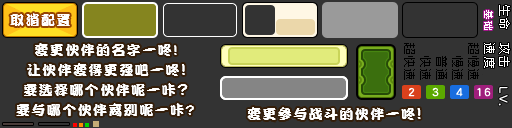
<style>
.page{position:relative;width:512px;height:128px;background:#333333}
.page>*{position:absolute;margin:0}
.t1{font:11.9px "ZpixEX2";letter-spacing:0.1em;color:#ffffff}
.t2{font:14px "DFPKanTingLiuW9";letter-spacing:0.1em;color:#ffffff}
.t3{font:10px "ZpixEX2";letter-spacing:0.1em;color:#ffffff}
.t4{font:12px "ZpixEX2";letter-spacing:0.1em;color:#000000}
.t5{font:16px "DFPKanTingLiuW9";letter-spacing:0.1em;color:#ffffff}
</style>
<div class="page">
<p class="t1" style="left:499px;top:5px;width:11px;height:24px;rotate:90deg">生命</p>
<p class="t2" style="left:10px;top:13px;width:60px;height:13px">取消配置</p>
<p class="t3" style="left:484px;top:10px;width:9px;height:20px;rotate:90deg">基础</p>
<p class="t2" style="left:35px;top:43px;width:142px;height:13px">变更伙伴的名字一咚!</p>
<p class="t4" style="left:404px;top:43px;width:11px;height:37px;rotate:90deg">超快速</p>
<p class="t4" style="left:468px;top:43px;width:11px;height:37px;rotate:90deg">超慢速</p>
<p class="t1" style="left:484px;top:43px;width:11px;height:25px;rotate:90deg">速度</p>
<p class="t1" style="left:499px;top:43px;width:11px;height:24px;rotate:90deg">攻击</p>
<p class="t2" style="left:27px;top:63px;width:158px;height:13px">让伙伴变得更强吧一咚<span class="t5">!</span></p>
<p class="t4" style="left:420px;top:56px;width:11px;height:24px;rotate:90deg">快速</p>
<p class="t4" style="left:436px;top:56px;width:11px;height:24px;rotate:90deg">普通</p>
<p class="t4" style="left:452px;top:56px;width:11px;height:24px;rotate:90deg">慢速</p>
<p class="t2" style="left:24px;top:83px;width:164px;height:13px">要选择哪个伙伴呢一咔<span class="t5">?</span></p>
<p class="t2" style="left:16px;top:103px;width:178px;height:14px">要与哪个伙伴离别呢一咔?</p>
<p class="t2" style="left:247px;top:107px;width:174px;height:13px">变更参与战斗的伙伴一咚<span class="t5">!</span></p>
</div>
